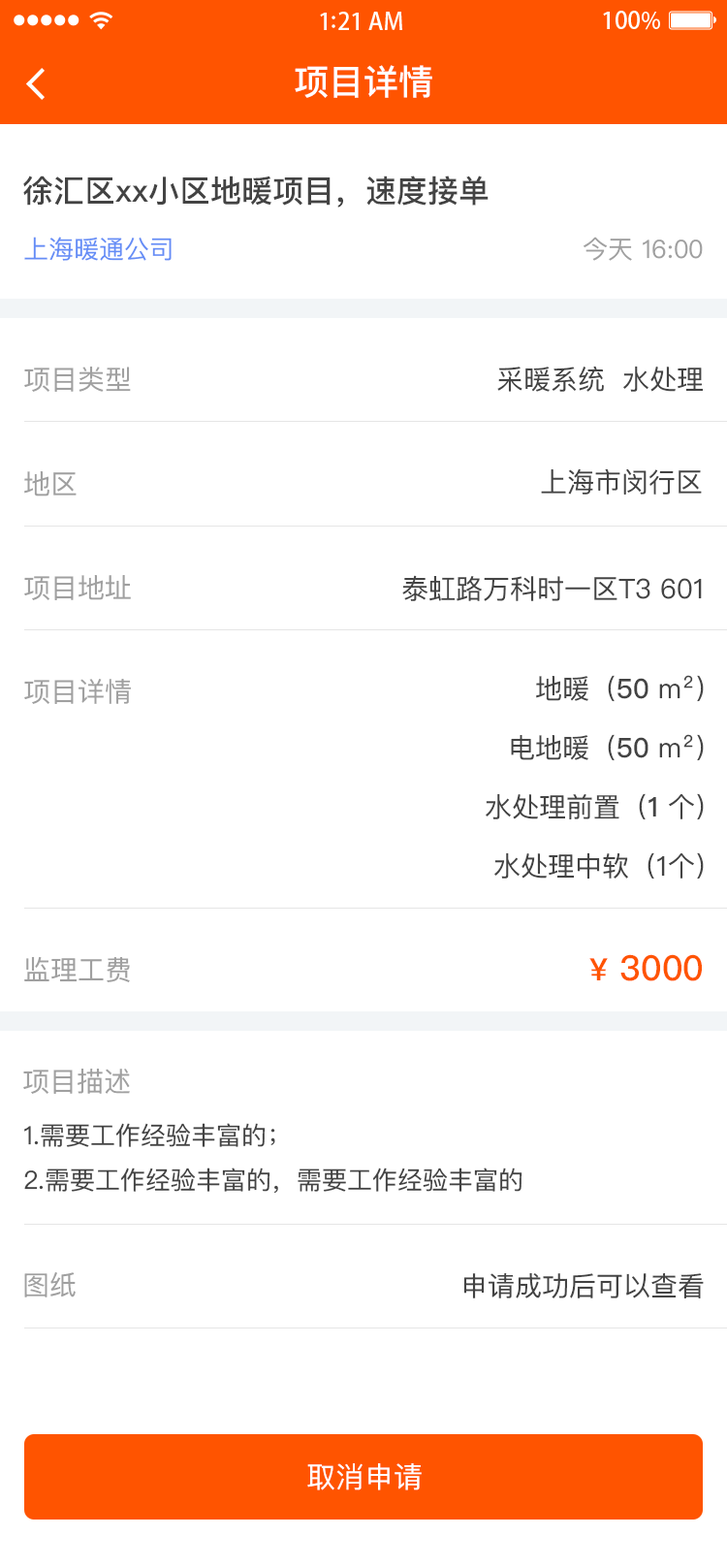
<style>
.page{position:relative;width:727px;height:1568px;background:#ffffff}
.page>*{position:absolute;margin:0}
.t1{font:34.9px "PingFangSC-Medium";color:#ffffff}
.t2{font:31px "PingFangSC-Medium";color:#434343}
.t3{font:25.2px "PingFangSC-Regular";color:#648df6}
.t4{font:25.2px "PingFangSC-Regular";color:#a0a0a0}
.t5{font:27.2px "PingFangSC-Regular";color:#434343}
.t6{font:27.2px "PingFangSC-Regular";color:#a0a0a0}
.t7{font:27.2px/63px "PingFangSC-Regular";color:#434343}
.t8{font:27.2px/63px "PingFangSC-Medium";color:#434343}
.t9{font:34.9px "PingFangSC-Medium";color:#ff5400}
.t10{font:31px "PingFangSC-Medium";color:#ff5400}
.t11{font:25.2px/48.5px "PingFangSC-Regular";color:#434343}
.t12{font:29.1px "PingFangSC-Regular";color:#ffffff;text-transform:uppercase}
</style>
<div class="page">
<p class="t1" style="left:295px;top:65px;width:137px;height:33px">项目详情</p>
<p class="t2" style="left:23px;top:176px;width:466px;height:32px">徐汇区xx小区地暖项目，速度接单</p>
<p class="t3" style="left:24px;top:237px;width:148px;height:24px">上海暖通公司</p>
<p class="t4" style="left:584px;top:237px;width:119px;height:24px">今天 16:00</p>
<p class="t5" style="left:497px;top:366px;width:206px;height:26px">采暖系统  水处理</p>
<p class="t6" style="left:24px;top:367px;width:107px;height:25px">项目类型</p>
<p class="t6" style="left:24px;top:471px;width:53px;height:25px">地区</p>
<p class="t5" style="left:541px;top:468px;width:161px;height:27px">上海市闵行区</p>
<p class="t6" style="left:24px;top:575px;width:107px;height:25px">项目地址</p>
<p class="t5" style="left:402px;top:575px;width:300px;height:26px">泰虹路万科时一区T3 601</p>
<p class="t7" style="left:486px;top:675px;width:218px;height:205px;text-align:right">地暖（<span class="t8">50 </span>m²）<br>电地暖（<span class="t8">50 </span>m²）<br>水处理前置（<span class="t8">1 </span>个）<br>水处理中软（1个）</p>
<p class="t6" style="left:24px;top:679px;width:107px;height:25px">项目详情</p>
<p class="t6" style="left:24px;top:956px;width:106px;height:26px">监理工费</p>
<p class="t9" style="left:590px;top:954px;width:112px;height:27px"><span class="t10">¥</span> 3000</p>
<p class="t6" style="left:23px;top:1069px;width:107px;height:25px">项目描述</p>
<p class="t11" style="left:24px;top:1123px;width:499px;height:71px">1.需要工作经验丰富的；<br>2.需要工作经验丰富的，需要工作经验丰富的</p>
<p class="t6" style="left:24px;top:1272px;width:52px;height:25px">图纸</p>
<p class="t5" style="left:464px;top:1273px;width:240px;height:25px">申请成功后可以查看</p>
<p class="t12" style="left:307px;top:1463px;width:115px;height:27px">取消申请</p>
</div>
